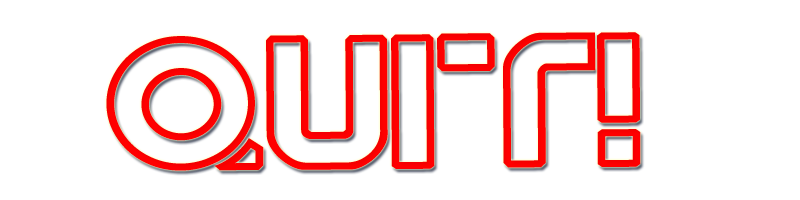
<style>
.page{position:relative;width:800px;height:200px;background:#ffffff}
.page>*{position:absolute;margin:0}
.t1{font:191.7px "TRN";color:#ff0000;scale:1.08 1}
</style>
<div class="page">
<p class="t1" style="left:106px;top:32px;width:535px;height:139px">Quit!</p>
</div>
